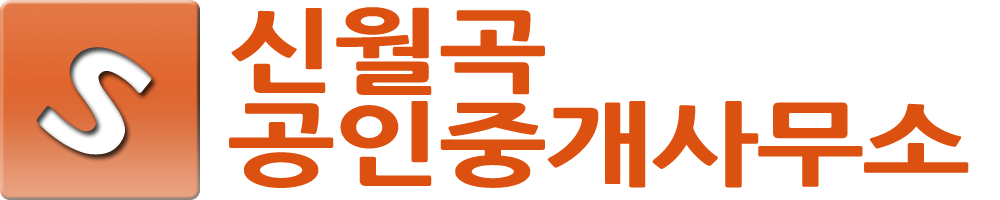
<style>
.page{position:relative;width:1000px;height:200px;background:#ffffff}
.page>*{position:absolute;margin:0}
.t1{font:90px/93px "NanumGothicExtraBold";letter-spacing:-0.025em;color:#dc5010;scale:1.29 1}
</style>
<div class="page">
<p class="t1" style="left:229px;top:7px;width:740px;height:181px">신월곡<br>공인중개사무소</p>
</div>
